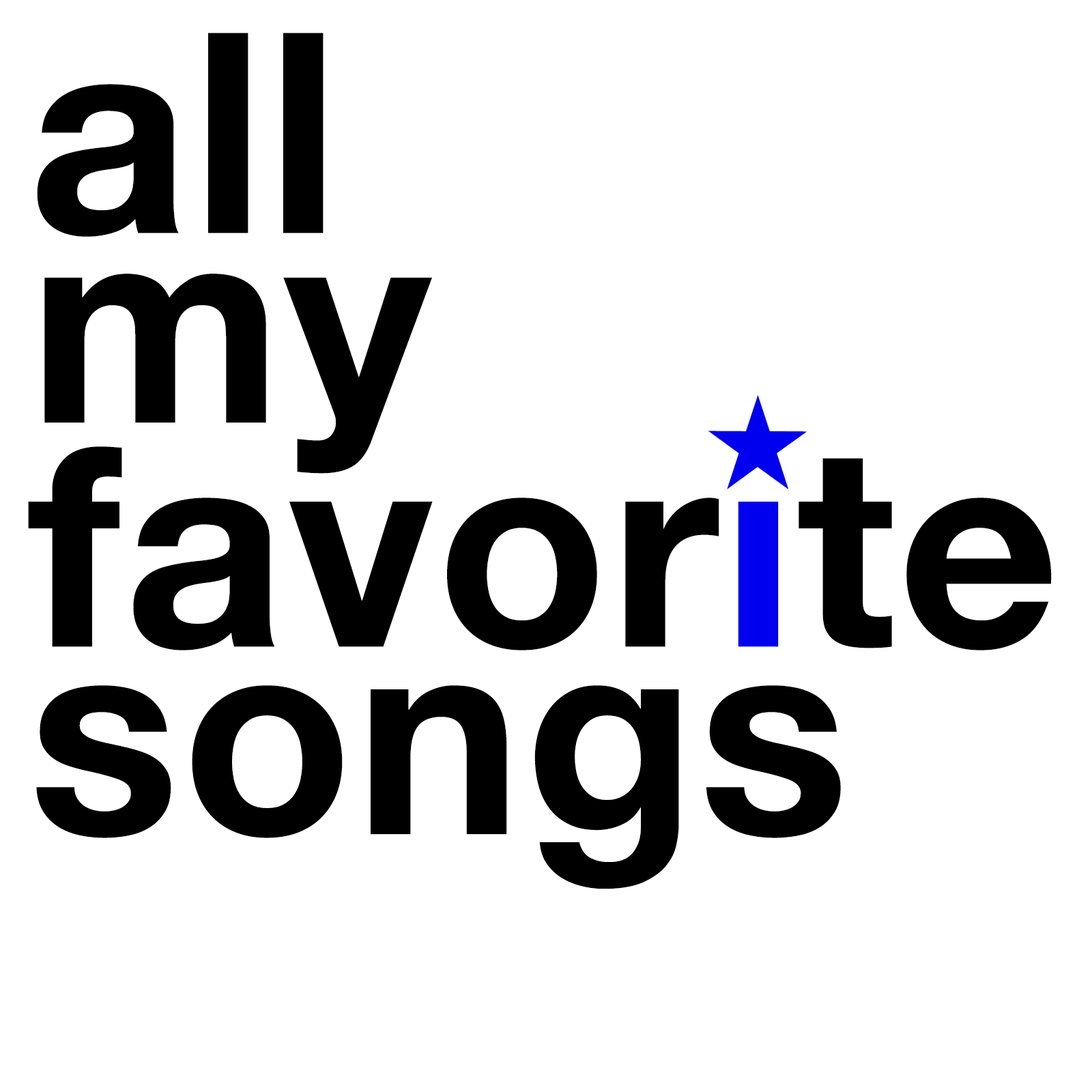
<style>
.page{position:relative;width:1092px;height:1092px;background:#ffffff}
.page>*{position:absolute;margin:0}
.t1{font:280px/224px "HelveticaNeue-Bold";letter-spacing:0.01em;color:#000000}
.t2{font:280px/189.5px "HelveticaNeue-Bold";letter-spacing:0.01em;color:#000000}
.t3{font:280px/224px "HelveticaNeue-Bold";letter-spacing:0.01em;color:#0000ee}
.t4{font:280px/187.6px "HelveticaNeue-Bold";letter-spacing:0.01em;color:#000000}
.t5{font:174px "AppleSymbols";letter-spacing:0.01em;color:#0000ee}
</style>
<div class="page">
<p class="t1" style="left:28px;top:33px;width:1024px;height:856px">all <br><span class="t2">my<br></span>favor<span class="t3">i</span>te<br><span class="t4">songs</span></p>
<p class="t5" style="left:708px;top:395px;width:99px;height:94px">★</p>
</div>
